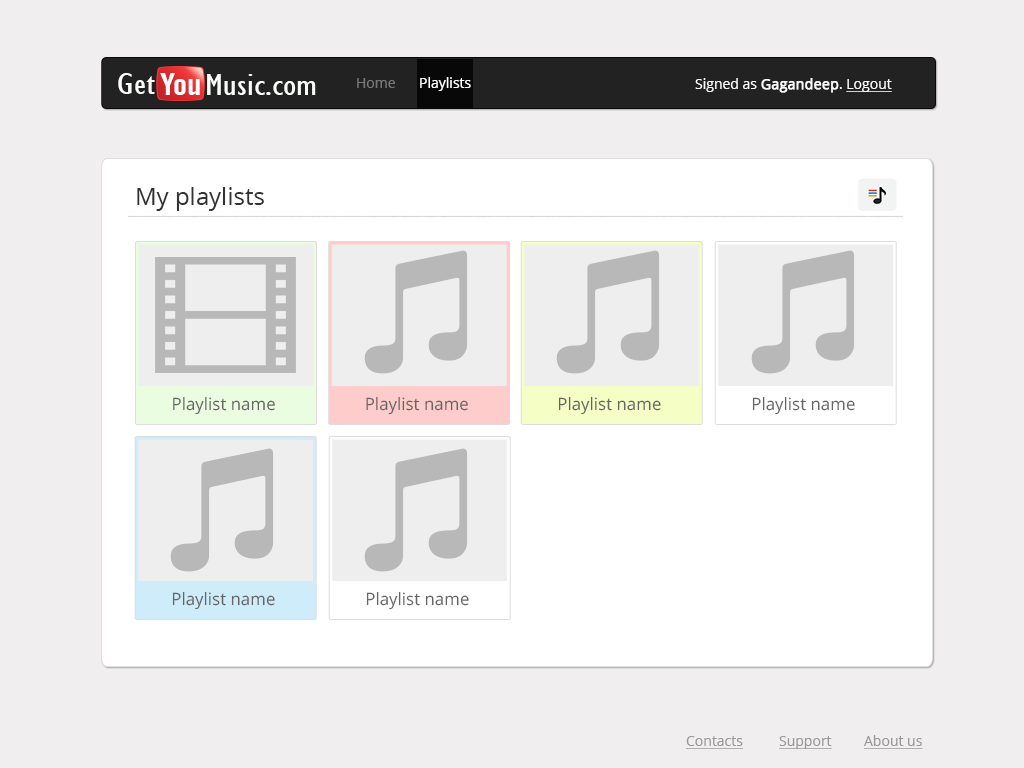
<style>
.page{position:relative;width:1024px;height:768px;background:#f0eeee}
.page>*{position:absolute;margin:0}
.t1{font:31px "GillSansMT-Condensed";color:#fafdfa;scale:1.27 1}
.t2{font:31px "AlternateGothicNo2BT-Regular";color:#fffefe;scale:1.27 1}
.t3{font:14px "OpenSans";color:#777777}
.t4{font:14px "OpenSans";color:#ffffff}
.t5{font:14px "OpenSans";color:#fbf9f9}
.t6{font:14px "OpenSans";color:#fbf9f9;font-weight:bold}
.t7{font:14px "OpenSans";color:#fbf9f9;text-decoration:underline}
.t8{font:24px "OpenSans";color:#333333}
.t9{font:17px "OpenSans";color:#666666}
.t10{font:17px "OpenSans";color:#656565}
.t11{font:14px "OpenSans";color:#999999;text-decoration:underline}
</style>
<div class="page">
<p class="t1" style="left:118px;top:73px;width:37px;height:21px">Get</p>
<p class="t2" style="left:160px;top:73px;width:40px;height:22px">You</p>
<p class="t1" style="left:207px;top:74px;width:58px;height:21px">Music</p>
<p class="t3" style="left:357px;top:78px;width:38px;height:10px">Home</p>
<p class="t4" style="left:420px;top:77px;width:51px;height:14px">Playlists</p>
<p class="t5" style="left:695px;top:78px;width:197px;height:15px">Signed as <span class="t6">Gagandeep</span>. <span class="t7">Logout</span></p>
<p class="t1" style="left:266px;top:81px;width:50px;height:14px">.com</p>
<p class="t8" style="left:137px;top:187px;width:127px;height:24px">My playlists</p>
<p class="t9" style="left:173px;top:397px;width:102px;height:18px">Playlist name</p>
<p class="t9" style="left:366px;top:397px;width:102px;height:18px">Playlist name</p>
<p class="t9" style="left:558px;top:396px;width:103px;height:19px">Playlist name</p>
<p class="t9" style="left:752px;top:396px;width:103px;height:19px">Playlist name</p>
<p class="t10" style="left:172px;top:591px;width:103px;height:19px">Playlist name</p>
<p class="t9" style="left:366px;top:591px;width:103px;height:19px">Playlist name</p>
<p class="t11" style="left:686px;top:736px;width:57px;height:13px">Contacts</p>
<p class="t11" style="left:779px;top:736px;width:53px;height:13px">Support</p>
<p class="t11" style="left:864px;top:735px;width:59px;height:14px">About us</p>
</div>
